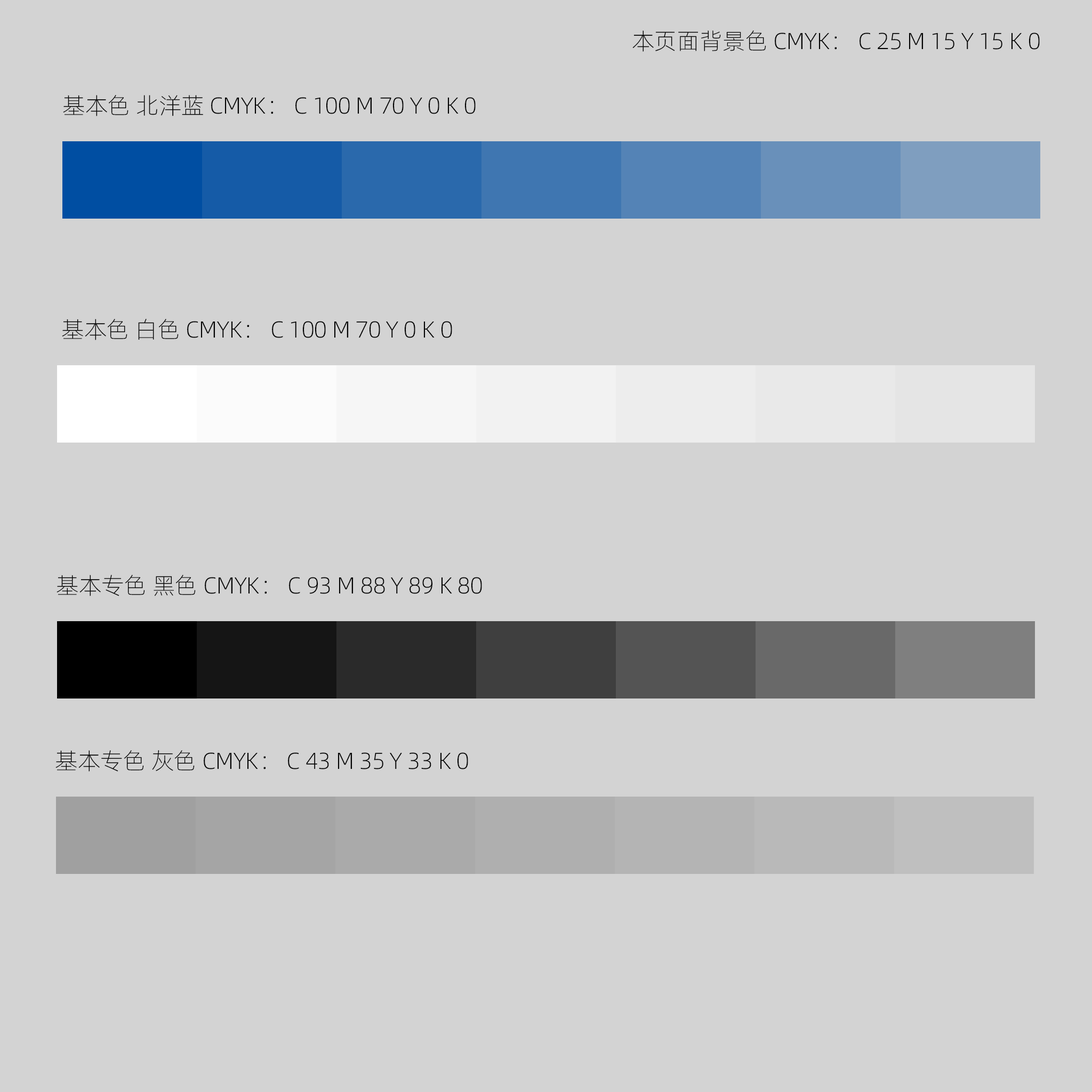
<style>
.page{position:relative;width:1092px;height:1092px;background:#d3d3d3}
.page>*{position:absolute;margin:0}
.t1{font:23px "Alibaba-PuHuiTi-L";color:#000000}
</style>
<div class="page">
<p class="t1" style="left:632px;top:30px;width:408px;height:22px">本页面背景色 CMYK： C 25 M 15 Y 15 K 0</p>
<p class="t1" style="left:63px;top:95px;width:413px;height:21px">基本色 北洋蓝 CMYK： C 100 M 70 Y 0 K 0</p>
<p class="t1" style="left:62px;top:319px;width:390px;height:21px">基本色 白色 CMYK： C 100 M 70 Y 0 K 0</p>
<p class="t1" style="left:57px;top:575px;width:425px;height:21px">基本专色 黑色 CMYK： C 93 M 88 Y 89 K 80</p>
<p class="t1" style="left:55px;top:750px;width:413px;height:22px">基本专色 灰色 CMYK： C 43 M 35 Y 33 K 0</p>
</div>
